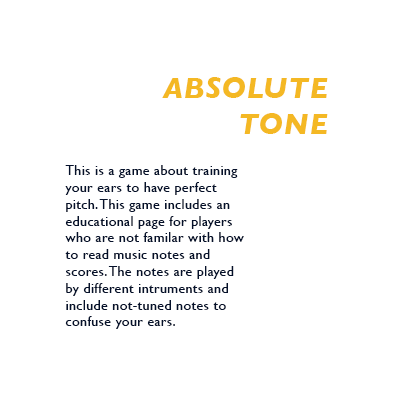
<style>
.page{position:relative;width:420px;height:420px;background:#ffffff}
.page>*{position:absolute;margin:0}
.t1{font:30px "GillSans-BoldItalic";letter-spacing:0.025em;color:#f4b824}
.t2{font:14px "GillSans";letter-spacing:0.025em;color:#05112b}
</style>
<div class="page">
<p class="t1" style="left:162px;top:77px;width:166px;height:57px;text-align:right">ABSOLUTE TONE</p>
<p class="t2" style="left:65px;top:165px;width:179px;height:164px">This is a game about training your ears to have perfect pitch. This game includes an educational page for players who are not familar with how to read music notes and scores. The notes are played by different intruments and include not-tuned notes to confuse your ears.</p>
</div>
